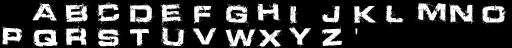
<style>
.page{position:relative;width:512px;height:48px;background:#000000}
.page>*{position:absolute;margin:0}
.t1{font:24px "Defused-ExtendedBold";letter-spacing:0.04em;color:#ffffff}
.t2{font:24px "MyriadPro-Regular";letter-spacing:0.04em;color:#ffffff}
</style>
<div class="page">
<p class="t1" style="left:32px;top:2px;width:26px;height:19px">a</p>
<p class="t1" style="left:64px;top:2px;width:25px;height:22px">b</p>
<p class="t1" style="left:96px;top:2px;width:24px;height:23px">c</p>
<p class="t1" style="left:128px;top:3px;width:27px;height:22px">d</p>
<p class="t1" style="left:160px;top:3px;width:24px;height:23px">e</p>
<p class="t1" style="left:194px;top:4px;width:18px;height:20px">f</p>
<p class="t1" style="left:226px;top:3px;width:25px;height:24px">g</p>
<p class="t1" style="left:257px;top:0px;width:24px;height:21px">h</p>
<p class="t1" style="left:289px;top:4px;width:9px;height:20px">i</p>
<p class="t1" style="left:322px;top:5px;width:18px;height:18px">j</p>
<p class="t1" style="left:353px;top:4px;width:24px;height:20px">k</p>
<p class="t1" style="left:385px;top:5px;width:19px;height:20px">l</p>
<p class="t1" style="left:415px;top:2px;width:32px;height:21px">m</p>
<p class="t1" style="left:449px;top:3px;width:26px;height:21px">n</p>
<p class="t1" style="left:480px;top:3px;width:27px;height:22px">o</p>
<p class="t1" style="left:2px;top:26px;width:21px;height:19px">p</p>
<p class="t1" style="left:65px;top:24px;width:22px;height:22px">r</p>
<p class="t1" style="left:97px;top:27px;width:24px;height:21px">s</p>
<p class="t1" style="left:129px;top:28px;width:20px;height:19px">t</p>
<p class="t1" style="left:160px;top:25px;width:26px;height:23px">u</p>
<p class="t1" style="left:192px;top:27px;width:25px;height:18px">v</p>
<p class="t1" style="left:256px;top:29px;width:26px;height:19px">x</p>
<p class="t1" style="left:288px;top:26px;width:24px;height:21px">y</p>
<p class="t1" style="left:322px;top:24px;width:21px;height:23px">z</p>
<p class="t2" style="left:355px;top:28px;width:3px;height:7px">'</p>
</div>
